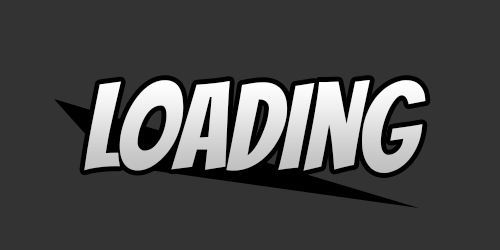
<style>
.page{position:relative;width:500px;height:250px;background:#333333}
.page>*{position:absolute;margin:0}
.t1{font:120px "Bangers-Regular"}
</style>
<div class="page">
<p class="t1" style="left:84px;top:80px;width:342px;height:93px">Loading</p>
</div>
